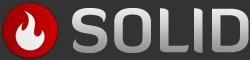
<style>
.page{position:relative;width:250px;height:60px;background:#333333}
.page>*{position:absolute;margin:0}
.t1{font:60px "DiavloBold-Regular";text-transform:uppercase;font-weight:bold}
</style>
<div class="page">
<p class="t1" style="left:72px;top:8px;width:177px;height:45px">Solid</p>
</div>
